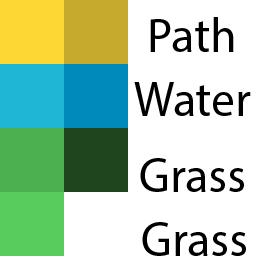
<style>
.page{position:relative;width:256px;height:256px;background:#ffffff}
.page>*{position:absolute;margin:0}
.t1{font:48px "MyriadPro-Regular";color:#000000}
.t2{font:48.9px "MyriadPro-Regular";color:#000000}
</style>
<div class="page">
<p class="t1" style="left:150px;top:17px;width:84px;height:35px">Path</p>
<p class="t2" style="left:134px;top:82px;width:117px;height:34px">Water</p>
<p class="t2" style="left:140px;top:158px;width:104px;height:34px">Grass</p>
<p class="t2" style="left:142px;top:222px;width:104px;height:34px">Grass</p>
</div>
